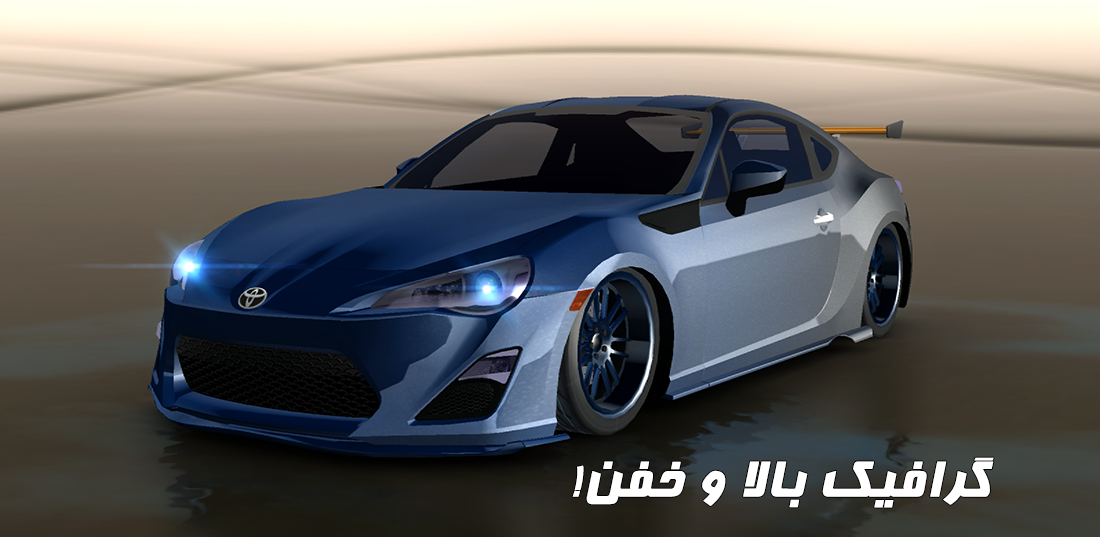
<style>
.page{position:relative;width:1100px;height:537px}
.page>*{position:absolute;margin:0}
.t1{font:60px "Far.Farnaz";color:#ffffff;font-weight:bold}
</style>
<div class="page">
<p class="t1" style="left:572px;top:457px;width:422px;height:51px">!ﻦﻔﺧ ﻭ ﻻﺎﺑ ﻚﯿﻓﺍﺮﮔ</p>
</div>
